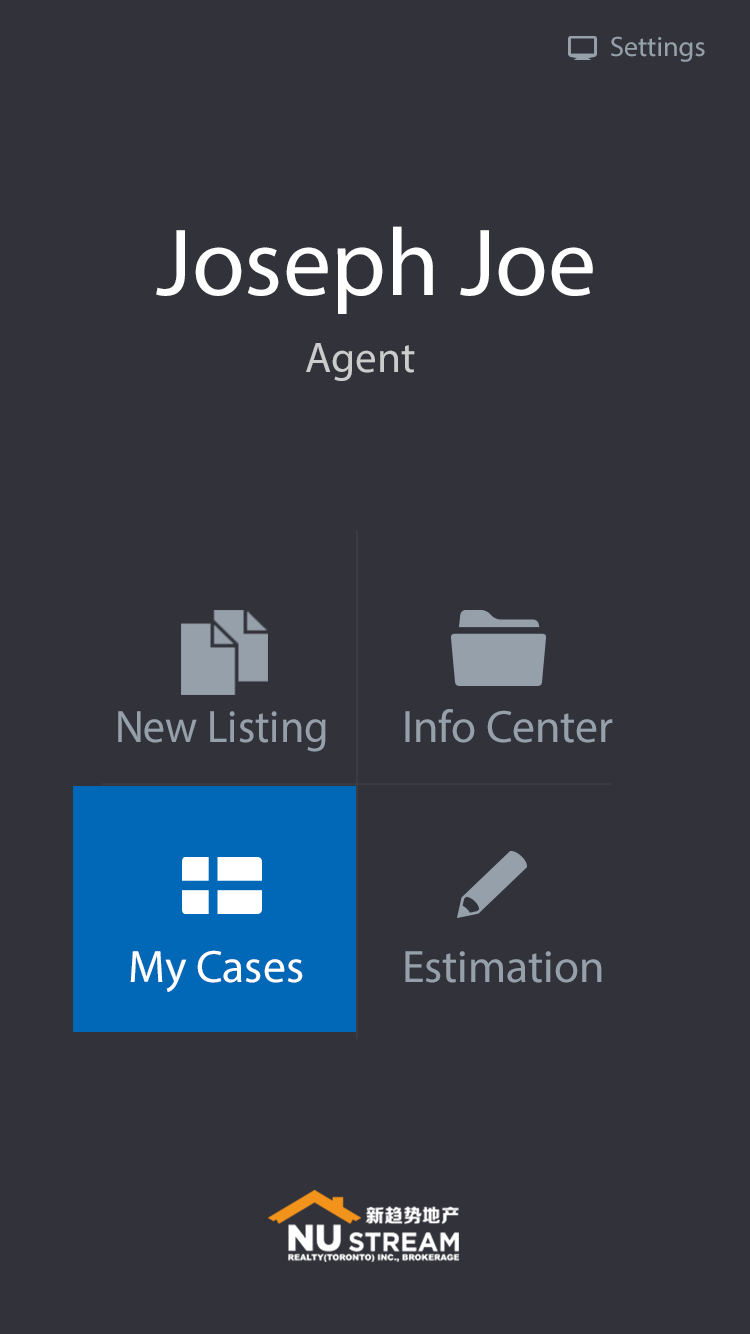
<style>
.page{position:relative;width:750px;height:1334px;background:#32323a}
.page>*{position:absolute;margin:0}
.t1{font:28.1px "MyriadPro-Regular";color:#95a0aa}
.t2{font:96.2px "MyriadPro-Regular";color:#ffffff}
.t3{font:43.1px "MyriadPro-Regular";color:#cccccc}
.t4{font:45.7px "MyriadPro-Regular";color:#95a0aa;scale:0.96 1}
.t5{font:45.7px "MyriadPro-Regular";color:#95a0aa}
.t6{font:45.7px "MyriadPro-Regular";color:#ffffff}
</style>
<div class="page">
<p class="t1" style="left:611px;top:36px;width:94px;height:26px">Settings</p>
<p class="t2" style="left:156px;top:226px;width:437px;height:88px">Joseph Joe</p>
<p class="t3" style="left:306px;top:343px;width:109px;height:38px">Agent</p>
<p class="t4" style="left:118px;top:711px;width:208px;height:41px">New Listing</p>
<p class="t5" style="left:405px;top:709px;width:208px;height:34px">Info Center</p>
<p class="t6" style="left:130px;top:950px;width:173px;height:42px">My Cases</p>
<p class="t5" style="left:405px;top:951px;width:197px;height:32px">Estimation</p>
</div>
